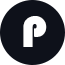
<style>
.page{position:relative;width:65px;height:65px;background:#0e111a}
.page>*{position:absolute;margin:0}
.t1{font:46px "Bauhaus93";color:#ffffff}
</style>
<div class="page">
<p class="t1" style="left:23px;top:16px;width:24px;height:31px">P</p>
</div>
